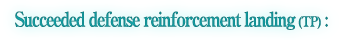
<style>
.page{position:relative;width:342px;height:40px}
.page>*{position:absolute;margin:0}
.t1{font:20px "RyuminPro-ExBold";letter-spacing:-0.08em;color:#15a7ac;scale:0.85 1}
.t2{font:14px "RyuminPro-ExBold";letter-spacing:-0.08em;color:#15a7ac;scale:0.85 1}
</style>
<div class="page">
<p class="t1" style="left:15px;top:11px;width:313px;height:19px">Succeeded defense reinforcement landing <span class="t2">(TP)</span> :</p>
</div>
